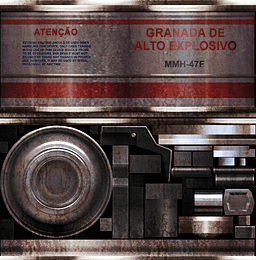
<style>
.page{position:relative;width:256px;height:260px}
.page>*{position:absolute;margin:0}
.t1{font:9px "Arial-BoldMT";color:#6d0f0f;font-weight:bold;scale:0.96 1}
.t2{font:12.2px/13.3px "Arial-BoldMT";color:#6d0f0f;scale:0.96 1}
</style>
<div class="page">
<p class="t1" style="left:34px;top:26px;width:44px;height:11px">ATENÇÃO</p>
<p class="t2" style="left:134px;top:28px;width:103px;height:23px;text-align:center">GRANADA DE<br>ALTO EXPLOSIVO</p>
</div>
